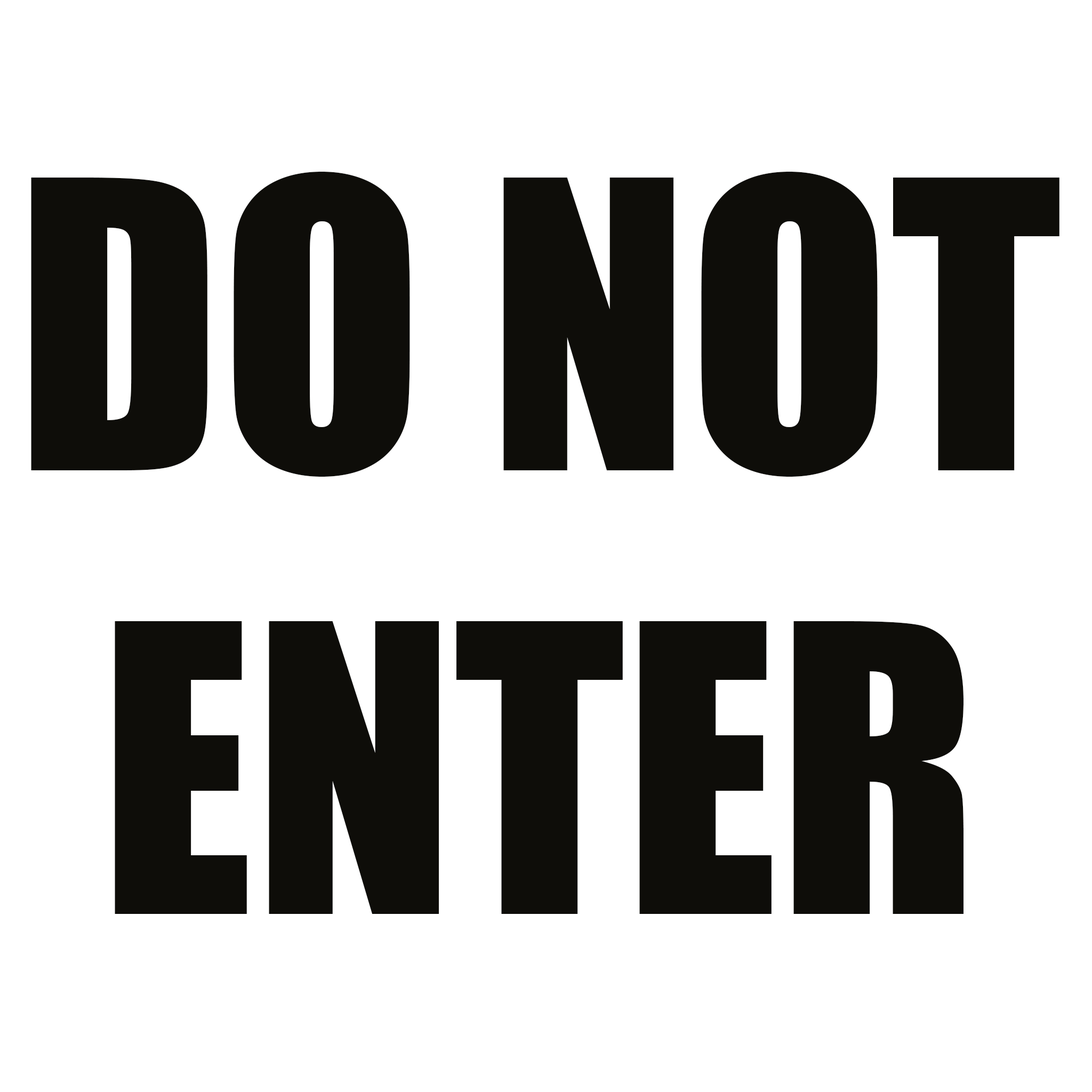
<style>
.page{position:relative;width:1092px;height:1092px;background:#ffffff}
.page>*{position:absolute;margin:0}
.t1{font:370px "Impact";color:#0e0d09}
</style>
<div class="page">
<p class="t1" style="left:31px;top:172px;width:1028px;height:742px;text-align:center">DO NOT<br>ENTER</p>
</div>
